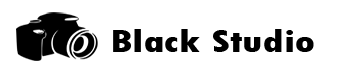
<style>
.page{position:relative;width:350px;height:80px;background:#ffffff}
.page>*{position:absolute;margin:0}
.t1{font:32.8px "TwCenMT-CondensedExtraBold";color:#000000;scale:1.34 1}
</style>
<div class="page">
<p class="t1" style="left:113px;top:29px;width:201px;height:23px">Black Studio</p>
</div>
